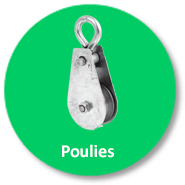
<style>
.page{position:relative;width:185px;height:185px;background:#00cc66}
.page>*{position:absolute;margin:0}
.t1{font:18px "Calibri-Bold";color:#ffffff}
</style>
<div class="page">
<p class="t1" style="left:62px;top:144px;width:52px;height:14px">Poulies</p>
</div>
